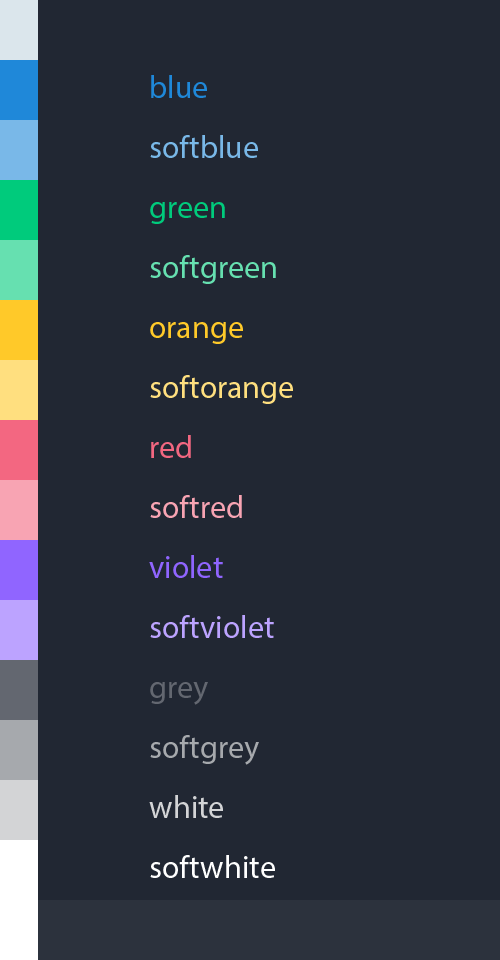
<style>
.page{position:relative;width:500px;height:960px;background:#212733}
.page>*{position:absolute;margin:0}
.t1{font:32px/60px "MyriadPro-Regular"}
</style>
<div class="page">
<p class="t1" style="left:149px;top:75px;width:144px;height:803px">blue<br>softblue<br>green<br>softgreen<br>orange<br>softorange<br>red<br>softred<br>violet<br>softviolet<br>grey<br>softgrey<br>white<br>softwhite</p>
</div>
